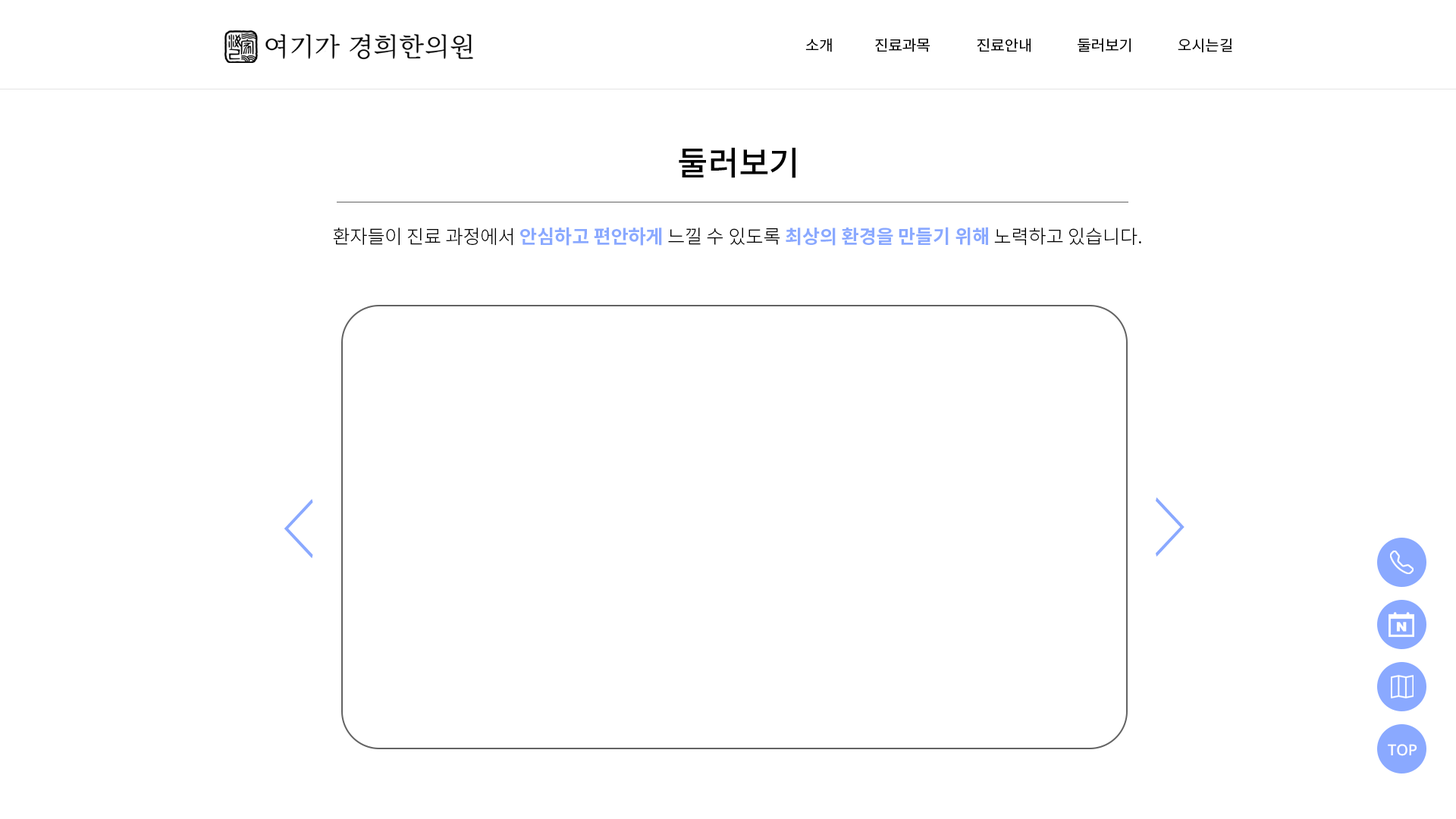
<style>
.page{position:relative;width:1456px;height:819px;background:#ffffff}
.page>*{position:absolute;margin:0}
.t1{font:15.2px "NotoSansKR-Regular";color:#000000}
.t2{font:33.4px "NotoSansKR-Medium";color:#000000}
.t3{font:19px "NotoSansKR-Bold";color:#8aa9ff}
.t4{font:19px "NotoSansKR-Light";color:#000000}
.t5{font:76.5px "NotoSansKR-Light";color:#8aa9ff;scale:0.48 1}
.t6{font:15.2px "NotoSans-Medium";color:#ffffff}
</style>
<div class="page">
<p class="t1" style="left:805px;top:38px;width:27px;height:14px">소개</p>
<p class="t1" style="left:875px;top:38px;width:55px;height:14px">진료과목</p>
<p class="t1" style="left:977px;top:38px;width:54px;height:14px">진료안내</p>
<p class="t1" style="left:1078px;top:38px;width:53px;height:14px">둘러보기</p>
<p class="t1" style="left:1178px;top:38px;width:54px;height:14px">오시는길</p>
<p class="t2" style="left:679px;top:147px;width:116px;height:31px">둘러보기</p>
<p class="t3" style="left:333px;top:227px;width:808px;height:19px"><span class="t4">환자들이 진료 과정에서 </span>안심하고 편안하게<span class="t4"> 느낄 수 있도록 </span>최상의 환경을 만들기 위해<span class="t4"> 노력하고 있습니다.</span></p>
<p class="t5" style="left:1156px;top:497px;width:29px;height:60px;rotate:180deg">＜</p>
<p class="t5" style="left:284px;top:499px;width:29px;height:59px">＜</p>
<p class="t6" style="left:1388px;top:744px;width:29px;height:12px">TOP</p>
</div>
